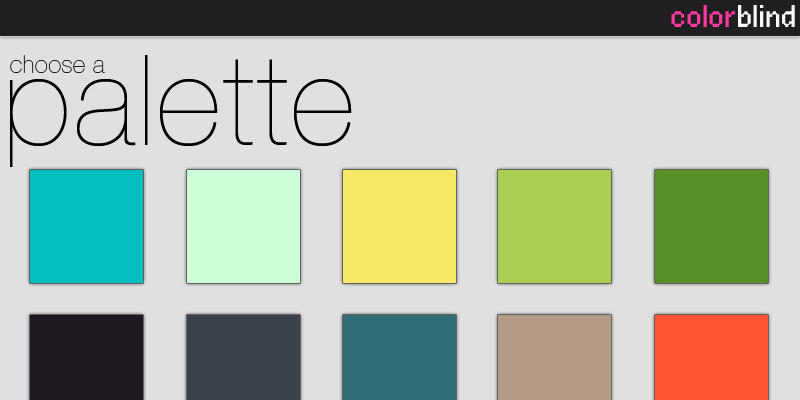
<style>
.page{position:relative;width:800px;height:400px;background:#e0e0e0}
.page>*{position:absolute;margin:0}
.t1{font:25.3px "PFRondaSeven";color:#ff399f}
.t2{font:25.3px "PFRondaSeven";color:#f9f9f9}
.t3{font:24px "HelveticaNeueLTStd-UltLt";letter-spacing:0.025em;color:#1e1e1e}
.t4{font:126.6px "HelveticaNeueLTStd-UltLt";letter-spacing:0.025em;color:#000000}
</style>
<div class="page">
<p class="t1" style="left:671px;top:5px;width:64px;height:22px">color</p>
<p class="t2" style="left:738px;top:5px;width:57px;height:22px">blind</p>
<p class="t3" style="left:10px;top:55px;width:95px;height:18px">choose a</p>
<p class="t4" style="left:10px;top:55px;width:342px;height:112px">palette</p>
</div>
